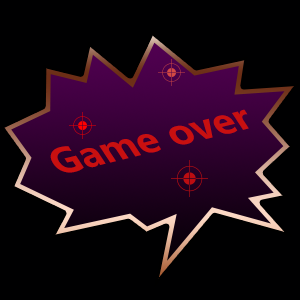
<style>
.page{position:relative;width:300px;height:300px;background:#000001}
.page>*{position:absolute;margin:0}
.t1{font:9px "MicrosoftYaHei-Bold";color:#c81010}
</style>
<div class="page">
<p class="t1" style="left:50px;top:109px;width:199px;height:64px;rotate:-14deg">Game over</p>
</div>
